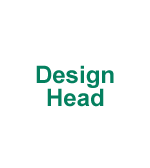
<style>
.page{position:relative;width:150px;height:168px;background:#ffffff}
.page>*{position:absolute;margin:0}
.t1{font:24px "Arial-BoldMT";color:#04805f}
</style>
<div class="page">
<p class="t1" style="left:36px;top:65px;width:78px;height:23px">Design</p>
<p class="t1" style="left:47px;top:88px;width:57px;height:19px">Head</p>
</div>
